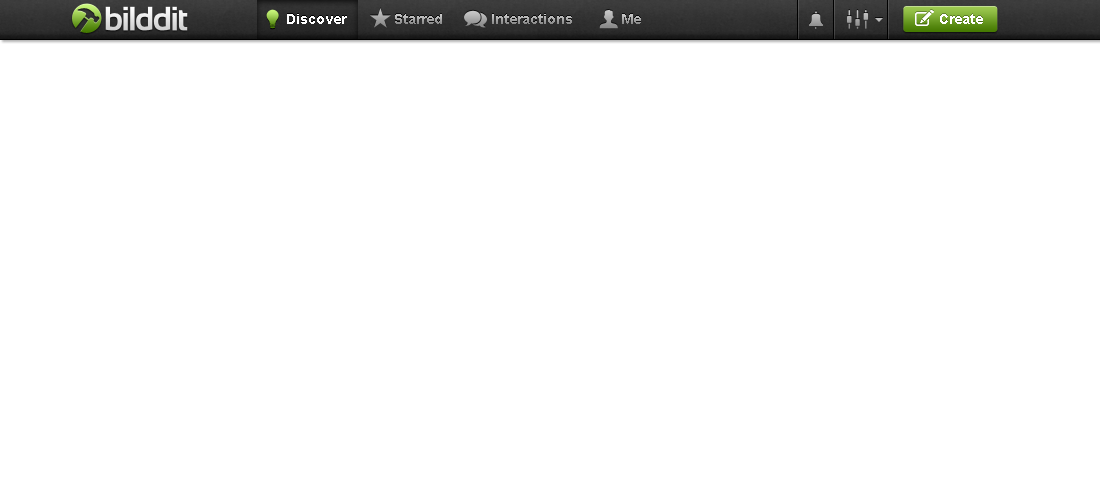
<style>
.page{position:relative;width:1100px;height:500px;background:#ffffff}
.page>*{position:absolute;margin:0}
.t1{font:14px "Arial-BoldMT";color:#b5b5b5}
.t2{font:14px "Arial-BoldMT";color:#ffffff}
</style>
<div class="page">
<p class="t1" style="left:287px;top:14px;width:354px;height:10px"><span class="t2">Discover</span>            Starred            Interactions            Me</p>
<p class="t2" style="left:287px;top:14px;width:60px;height:10px">Discover</p>
<p class="t2" style="left:940px;top:14px;width:43px;height:10px">Create</p>
</div>
